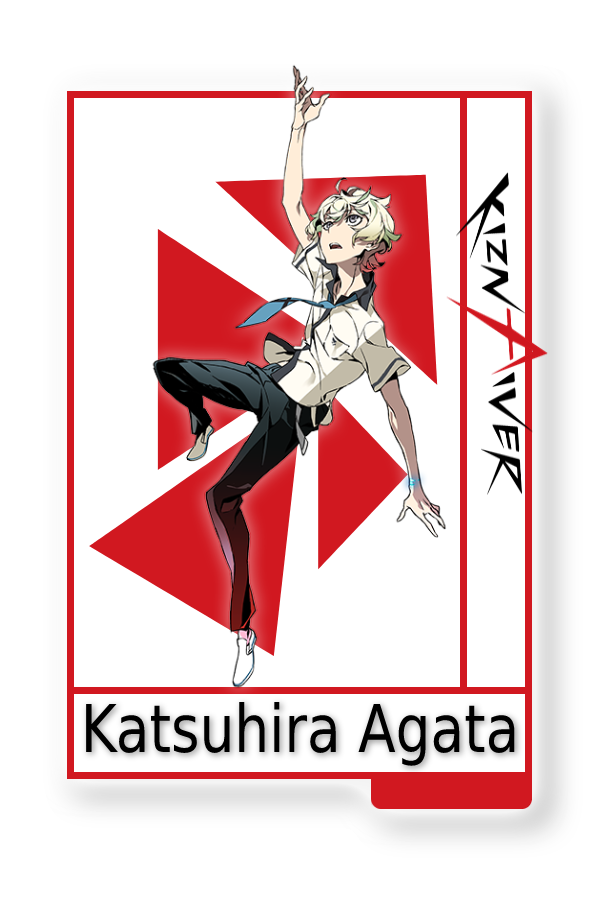
<style>
.page{position:relative;width:600px;height:900px;background:#ffffff}
.page>*{position:absolute;margin:0}
.t1{font:65.8px "CoolveticaRg-Regular";color:#000000;scale:0.84 1}
</style>
<div class="page">
<p class="t1" style="left:86px;top:702px;width:429px;height:64px">Katsuhira Agata</p>
</div>
